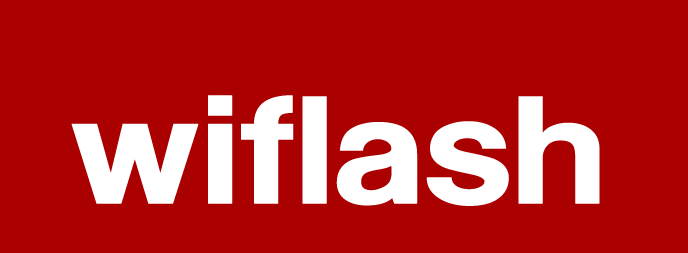
<style>
.page{position:relative;width:688px;height:253px;background:#ab0000}
.page>*{position:absolute;margin:0}
.t1{font:148px "Coolvetica";color:#ffffff;font-weight:bold;scale:1.12 1}
</style>
<div class="page">
<p class="t1" style="left:71px;top:95px;width:529px;height:111px">wiflash</p>
</div>
